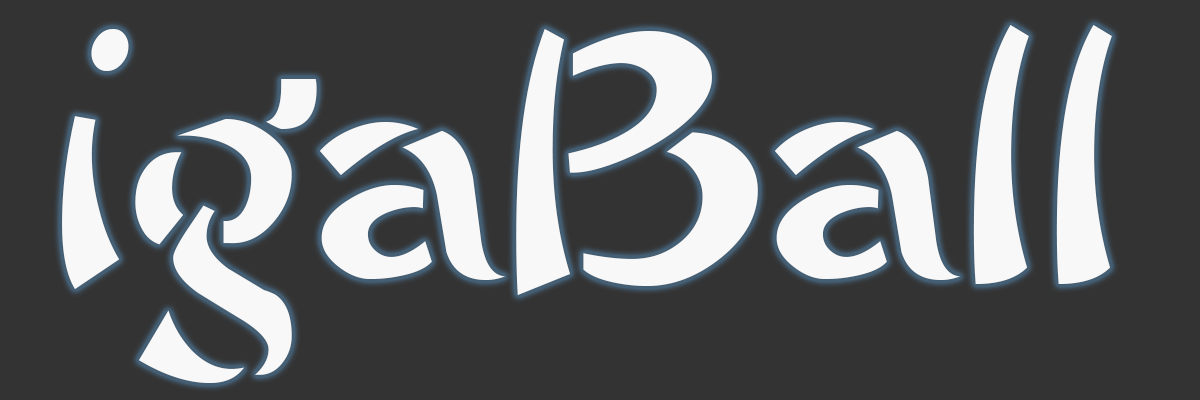
<style>
.page{position:relative;width:1200px;height:400px;background:#333333}
.page>*{position:absolute;margin:0}
.t1{font:300px "ChowFun";color:#f8f8f8}
</style>
<div class="page">
<p class="t1" style="left:62px;top:25px;width:1050px;height:358px">igaBall</p>
</div>
